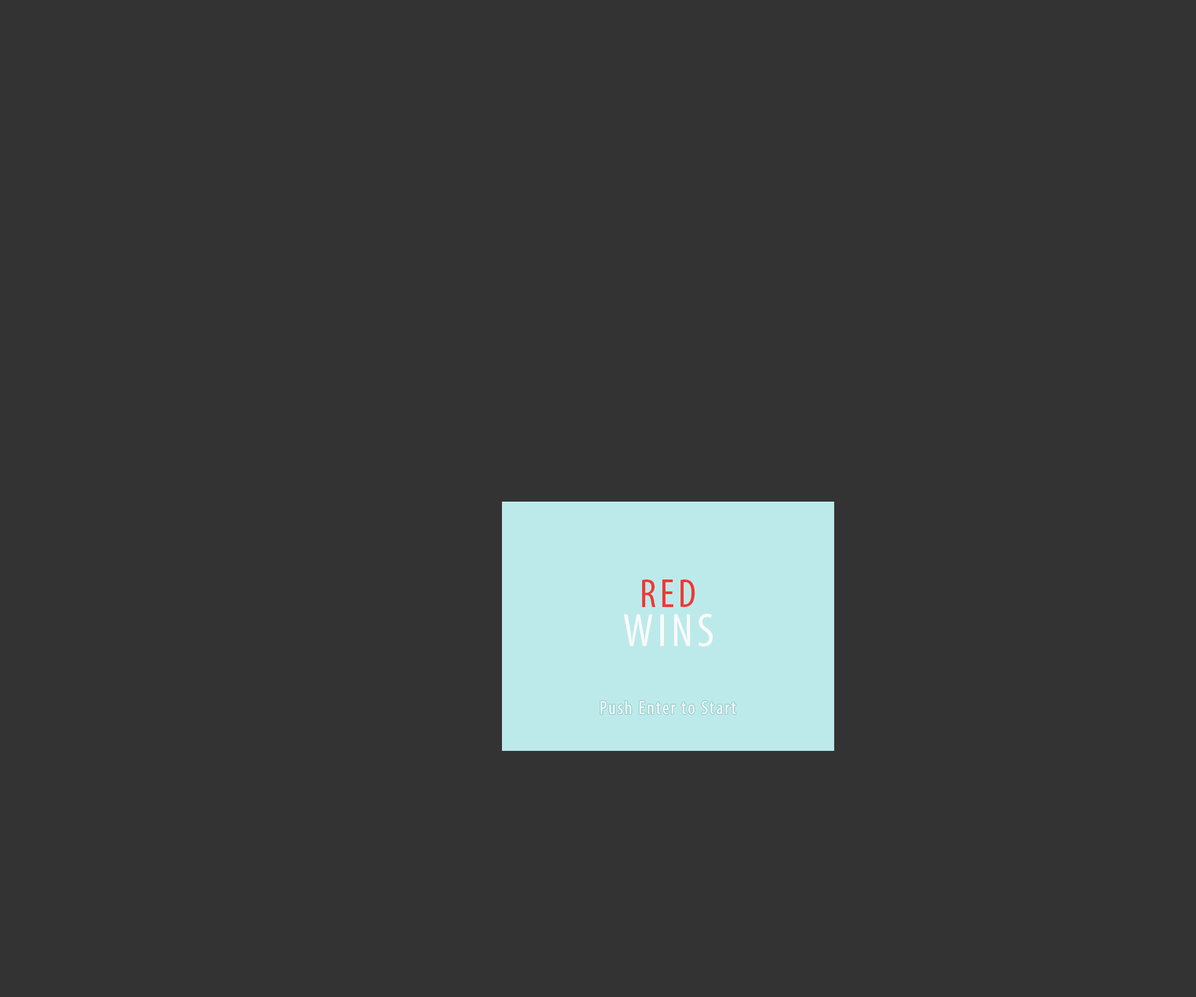
<style>
.page{position:relative;width:1196px;height:997px;background:#333333}
.page>*{position:absolute;margin:0}
.t1{font:40.5px "MyriadPro-Cond";letter-spacing:0.09em;color:#f23737}
.t2{font:46.7px "MyriadPro-Cond";letter-spacing:0.09em;color:#fafafa}
.t3{font:18.7px "MyriadPro-Cond";letter-spacing:0.09em;color:#fafafa}
</style>
<div class="page">
<p class="t1" style="left:642px;top:579px;width:53px;height:28px">RED</p>
<p class="t2" style="left:624px;top:614px;width:89px;height:32px">WINS</p>
<p class="t3" style="left:601px;top:701px;width:135px;height:13px">Push Enter to Start</p>
</div>
